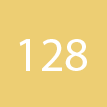
<style>
.page{position:relative;width:107px;height:107px;background:#edce73}
.page>*{position:absolute;margin:0}
.t1{font:48px "MyriadPro-Regular";color:#ffffff}
</style>
<div class="page">
<p class="t1" style="left:19px;top:39px;width:68px;height:32px">128</p>
</div>
